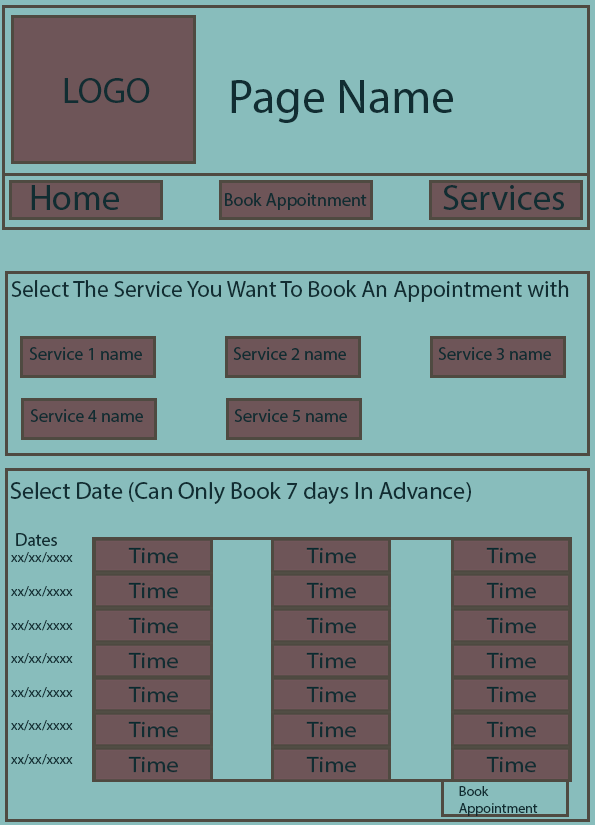
<style>
.page{position:relative;width:595px;height:825px;background:#88bdbc}
.page>*{position:absolute;margin:0}
.t1{font:36px "MyriadPro-Regular";color:#112d32}
.t2{font:18px "MyriadPro-Regular";color:#112d32}
.t3{font:48px "MyriadPro-Regular";color:#112d32}
.t4{font:23px "MyriadPro-Regular";color:#112d32}
.t5{font:24px "MyriadPro-Regular";color:#112d32}
.t6{font:14px "MyriadPro-Regular";color:#112d32}
</style>
<div class="page">
<p class="t1" style="left:64px;top:78px;width:86px;height:25px"><span class="t2"><br><br>     </span>LOGO</p>
<p class="t3" style="left:231px;top:80px;width:222px;height:43px">Page Name</p>
<p class="t1" style="left:31px;top:185px;width:88px;height:25px">Home</p>
<p class="t1" style="left:443px;top:185px;width:121px;height:25px">Services</p>
<p class="t2" style="left:225px;top:193px;width:142px;height:17px">Book Appoitnment</p>
<p class="t4" style="left:11px;top:280px;width:558px;height:22px">Select The Service You Want To Book An Appointment with</p>
<p class="t2" style="left:29px;top:347px;width:113px;height:13px">Service 1 name</p>
<p class="t2" style="left:233px;top:347px;width:113px;height:13px">Service 2 name</p>
<p class="t2" style="left:438px;top:347px;width:113px;height:13px">Service 3 name</p>
<p class="t2" style="left:30px;top:409px;width:113px;height:13px">Service 4 name</p>
<p class="t2" style="left:234px;top:409px;width:113px;height:13px">Service 5 name</p>
<p class="t5" style="left:10px;top:482px;width:461px;height:22px">Select Date (Can Only Book 7 days In Advance)</p>
<p class="t6" style="left:11px;top:533px;width:62px;height:232px"><span class="t5"><br><br>  </span><span class="t2">Dates<br></span>  xx/xx/xxxx<br><br>  xx/xx/xxxx<br><br>  xx/xx/xxxx<br><br>  xx/xx/xxxx<br><br>  xx/xx/xxxx<br><br>  xx/xx/xxxx<br><br>  xx/xx/xxxx</p>
<p class="t6" style="left:459px;top:786px;width:79px;height:30px">Book<br>Appointment</p>
</div>
